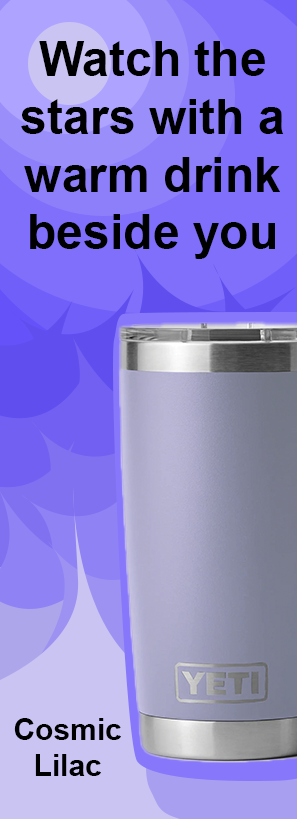
<style>
.page{position:relative;width:297px;height:819px}
.page>*{position:absolute;margin:0}
.t1{font:48px "Arial-BoldMT";color:#000000}
.t2{font:30px "Arial-BoldMT";color:#000000}
</style>
<div class="page">
<p class="t1" style="left:21px;top:41px;width:263px;height:218px;text-align:center">Watch the stars with a warm drink beside you</p>
<p class="t2" style="left:14px;top:718px;width:107px;height:58px;text-align:center">Cosmic Lilac</p>
</div>
